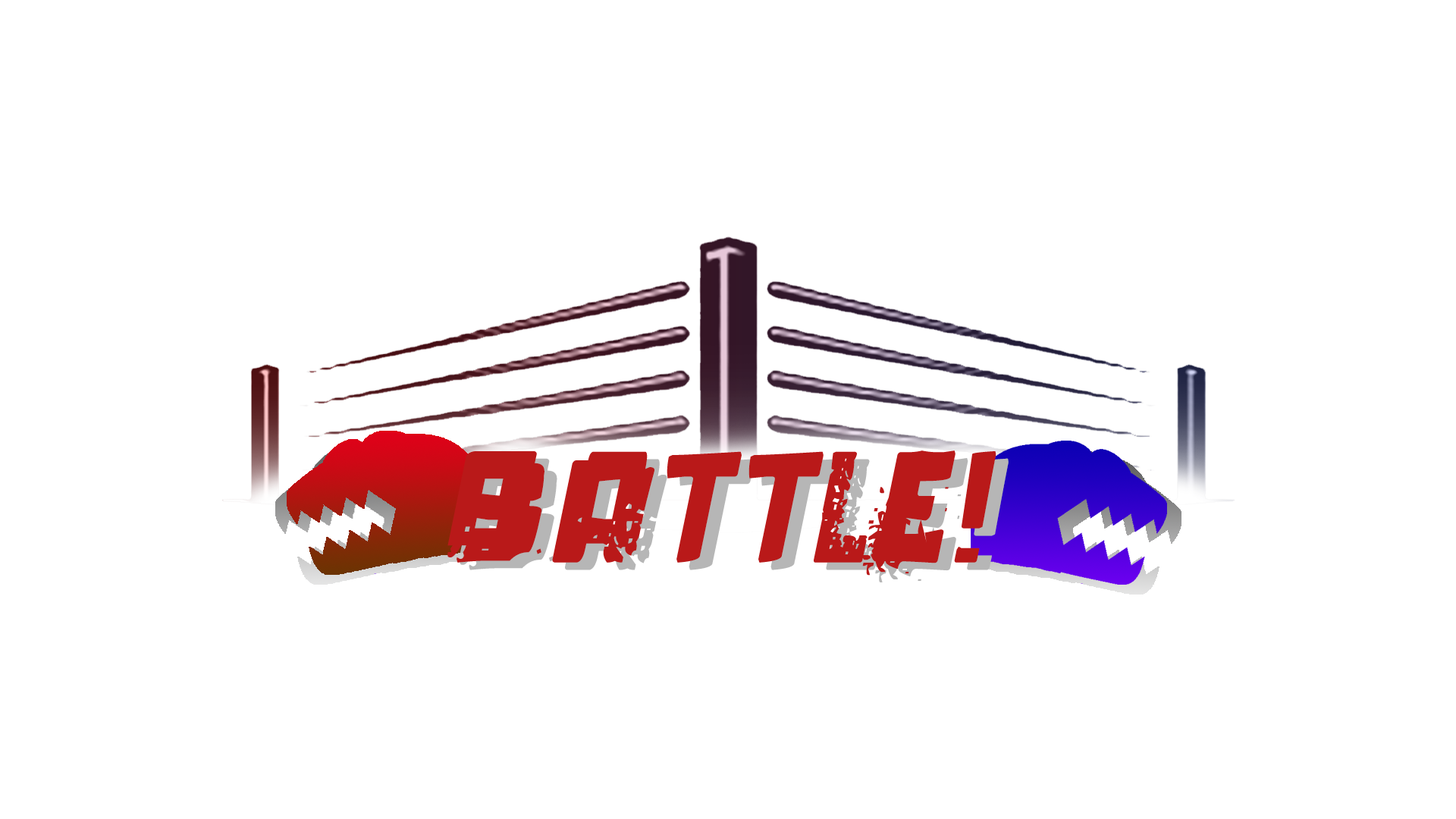
<style>
.page{position:relative;width:1456px;height:819px;background:#ffffff}
.page>*{position:absolute;margin:0}
.t1{font:159.1px "pixeldead-Italic";color:#b91919}
.t2{font:159.1px "pixeldead-Italic"}
</style>
<div class="page">
<p class="t1" style="left:447px;top:450px;width:549px;height:126px">Battle!</p>
<p class="t2" style="left:460px;top:458px;width:549px;height:124px">Battle!</p>
</div>
